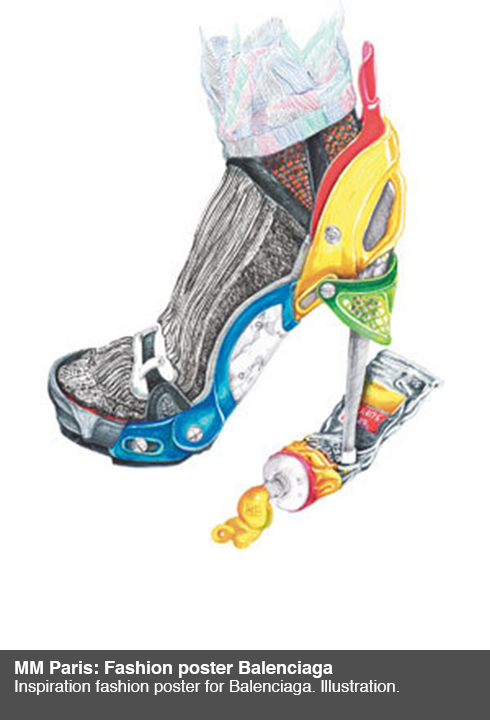
<style>
.page{position:relative;width:490px;height:720px;background:#ffffff}
.page>*{position:absolute;margin:0}
.t1{font:16.7px/18px "Helvetica";color:#ffffff}
.t2{font:18px/18px "Helvetica-Bold";color:#ffffff}
</style>
<div class="page">
<p class="t1" style="left:15px;top:661px;width:384px;height:34px"><span class="t2">MM Paris: Fashion poster Balenciaga<br></span>Inspiration fashion poster for Balenciaga. lllustration.</p>
</div>
